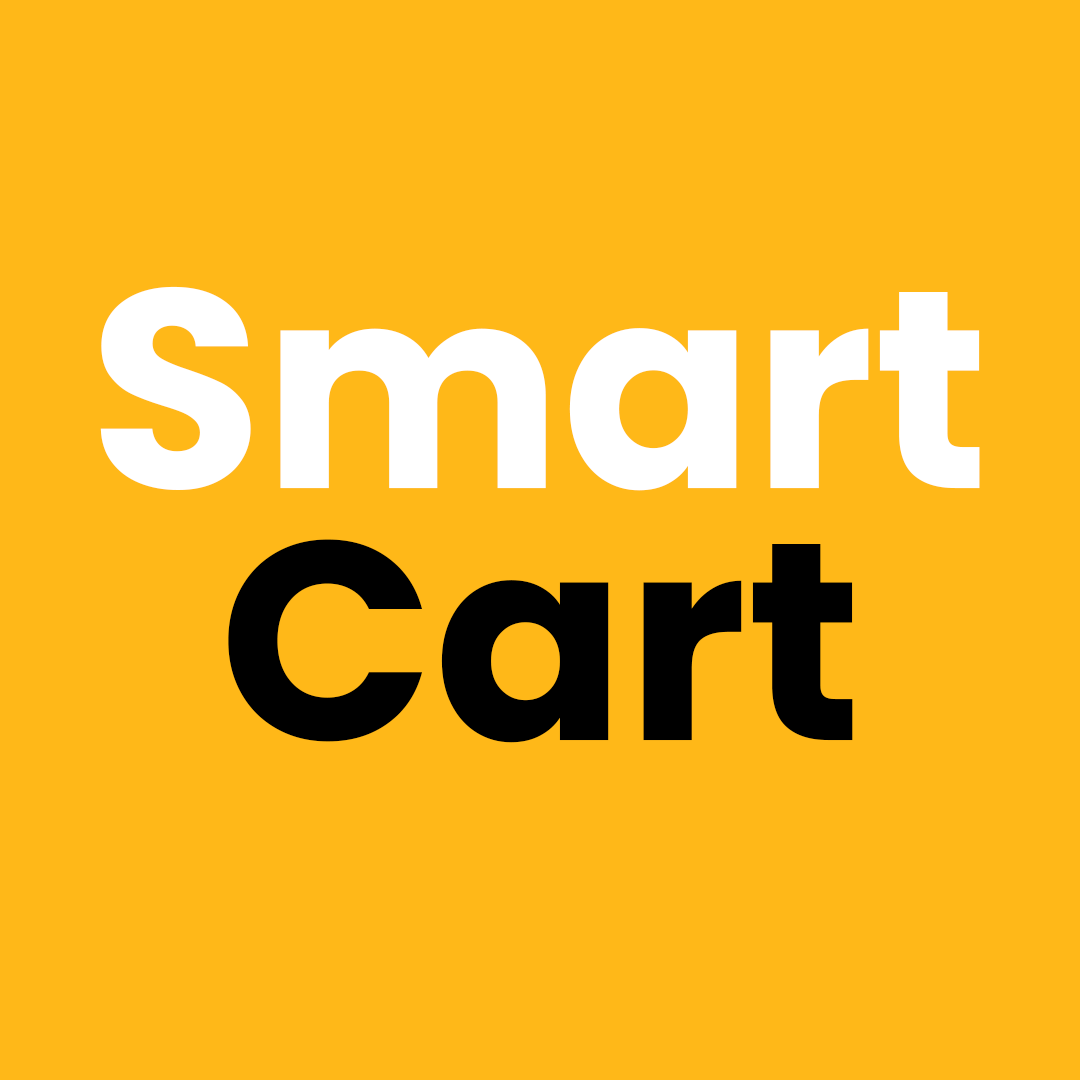
<style>
.page{position:relative;width:1080px;height:1080px;background:#ffb818}
.page>*{position:absolute;margin:0}
.t1{font:282.4px "Poppins-Bold";color:#ffffff}
.t2{font:282.4px "Poppins-Bold";color:#000000}
</style>
<div class="page">
<p class="t1" style="left:100px;top:286px;width:880px;height:205px">Smart</p>
<p class="t2" style="left:228px;top:539px;width:625px;height:204px">Cart</p>
</div>
